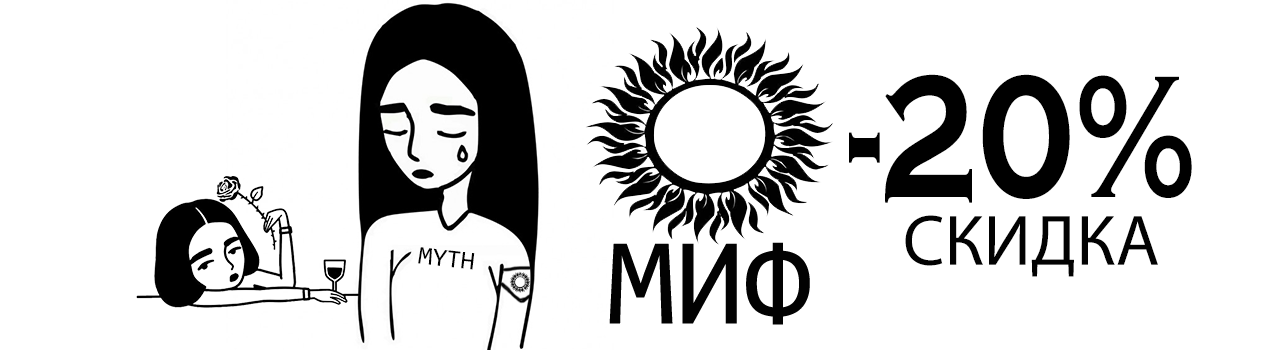
<style>
.page{position:relative;width:1287px;height:350px;background:#ffffff}
.page>*{position:absolute;margin:0}
.t1{font:180.4px "CopperplateGothic-Bold";color:#000000;scale:0.76 1}
.t2{font:72px "MyriadPro-Regular";color:#020202}
.t3{font:25.7px "Consolas";color:#000000}
</style>
<div class="page">
<p class="t1" style="left:849px;top:74px;width:343px;height:129px">-20%</p>
<p class="t2" style="left:905px;top:215px;width:253px;height:62px">СКИДКА</p>
<p class="t3" style="left:418px;top:247px;width:57px;height:23px;rotate:7deg">MYTH</p>
</div>
